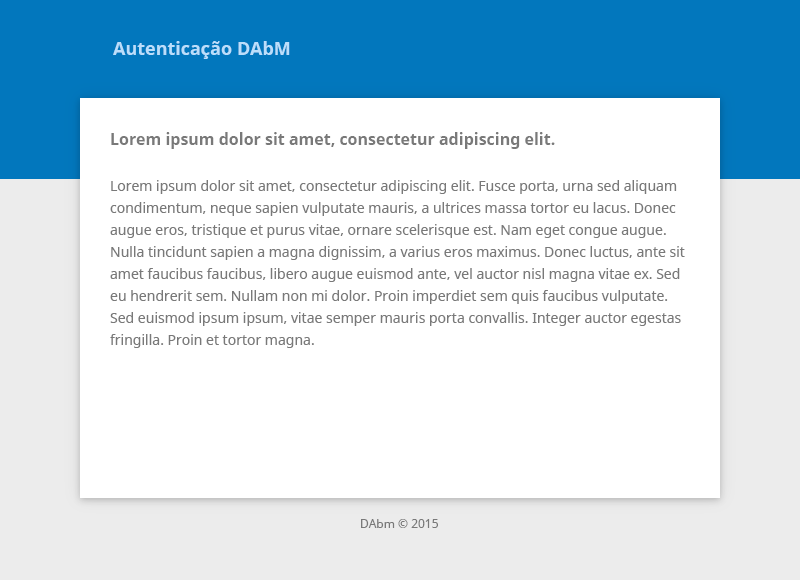
<style>
.page{position:relative;width:800px;height:580px;background:#ffffff}
.page>*{position:absolute;margin:0}
.t1{font:18px "NotoSans-Bold";color:#bbdefb}
.t2{font:16px "NotoSans-Bold";color:#797979}
.t3{font:14px/22px "NotoSans";color:#797979}
.t4{font:12px "NotoSans";color:#797979}
</style>
<div class="page">
<p class="t1" style="left:113px;top:41px;width:177px;height:18px">Autenticação DAbM</p>
<p class="t2" style="left:111px;top:132px;width:444px;height:17px">Lorem ipsum dolor sit amet, consectetur adipiscing elit.</p>
<p class="t3" style="left:110px;top:180px;width:575px;height:168px">Lorem ipsum dolor sit amet, consectetur adipiscing elit. Fusce porta, urna sed aliquam condimentum, neque sapien vulputate mauris, a ultrices massa tortor eu lacus. Donec augue eros, tristique et purus vitae, ornare scelerisque est. Nam eget congue augue. Nulla tincidunt sapien a magna dignissim, a varius eros maximus. Donec luctus, ante sit amet faucibus faucibus, libero augue euismod ante, vel auctor nisl magna vitae ex. Sed eu hendrerit sem. Nullam non mi dolor. Proin imperdiet sem quis faucibus vulputate. Sed euismod ipsum ipsum, vitae semper mauris porta convallis. Integer auctor egestas fringilla. Proin et tortor magna.</p>
<p class="t4" style="left:361px;top:519px;width:77px;height:9px">DAbm © 2015</p>
</div>
